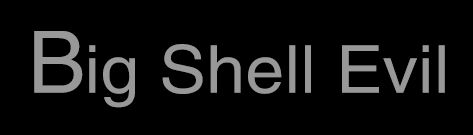
<style>
.page{position:relative;width:473px;height:135px;background:#000000}
.page>*{position:absolute;margin:0}
.t1{font:86.1px "Helvetica";letter-spacing:0.005em;color:#989898}
.t2{font:66px "Helvetica";letter-spacing:0.005em;color:#989898;scale:1.06 1}
</style>
<div class="page">
<p class="t1" style="left:34px;top:31px;width:49px;height:62px">B</p>
<p class="t2" style="left:89px;top:44px;width:356px;height:64px">ig Shell Evil</p>
</div>
